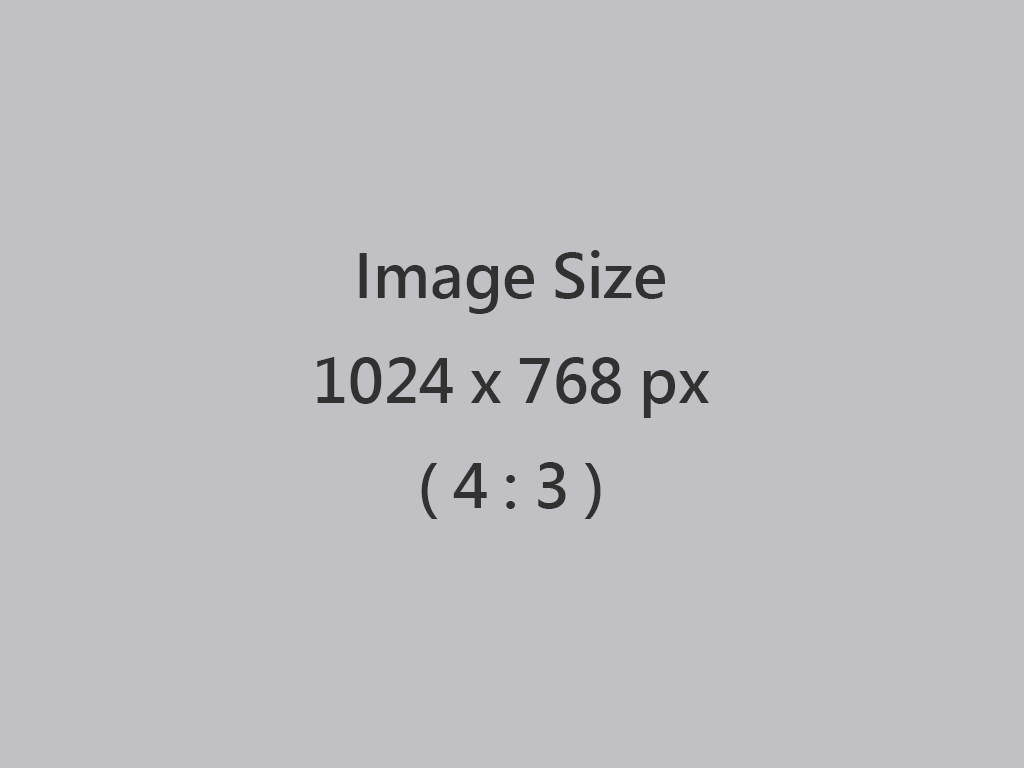
<style>
.page{position:relative;width:1024px;height:768px;background:#c1c0c5}
.page>*{position:absolute;margin:0}
.t1{font:60px "MicrosoftJhengHeiBold";color:#313131}
</style>
<div class="page">
<p class="t1" style="left:317px;top:250px;width:393px;height:269px;text-align:center">Image Size<br>1024 x 768 px<br>( 4 : 3 )</p>
</div>
